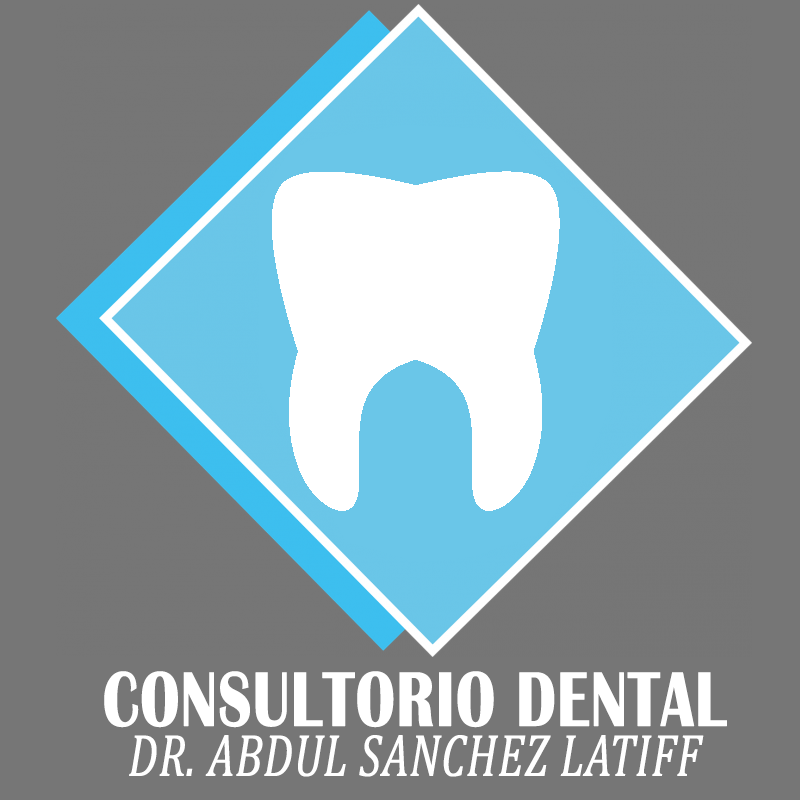
<style>
.page{position:relative;width:800px;height:800px;background:#767676}
.page>*{position:absolute;margin:0}
.t1{font:60px/50px "Cambria-Italic";color:#ffffff;font-weight:bold;scale:0.75 1}
.t2{font:80px/50px "BritannicBold";color:#ffffff;font-weight:bold;scale:0.75 1}
</style>
<div class="page">
<p class="t1" style="left:104px;top:671px;width:623px;height:106px;text-align:center"><span class="t2">CONSULTORIO DENTAL<br></span>DR. ABDUL SANCHEZ LATIFF</p>
</div>
